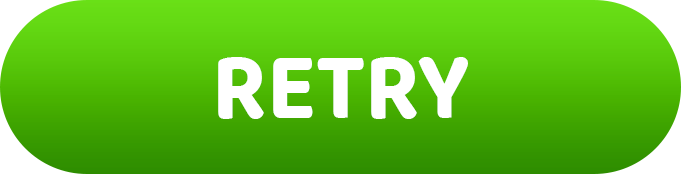
<style>
.page{position:relative;width:681px;height:174px}
.page>*{position:absolute;margin:0}
.t1{font:98.5px "BalooThambi2-Bold";color:#ffffff;scale:0.91 1}
</style>
<div class="page">
<p class="t1" style="left:218px;top:57px;width:250px;height:62px">RETRY</p>
</div>
